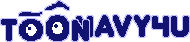
<style>
.page{position:relative;width:190px;height:42px;background:#ffffff}
.page>*{position:absolute;margin:0}
.t1{font:36px "Junegull";letter-spacing:0.02em;color:#121270}
</style>
<div class="page">
<p class="t1" style="left:76px;top:15px;width:113px;height:22px">NAVY4U</p>
<p class="t1" style="left:1px;top:19px;width:16px;height:22px">T</p>
<p class="t1" style="left:72px;top:20px;width:17px;height:21px">N</p>
</div>
